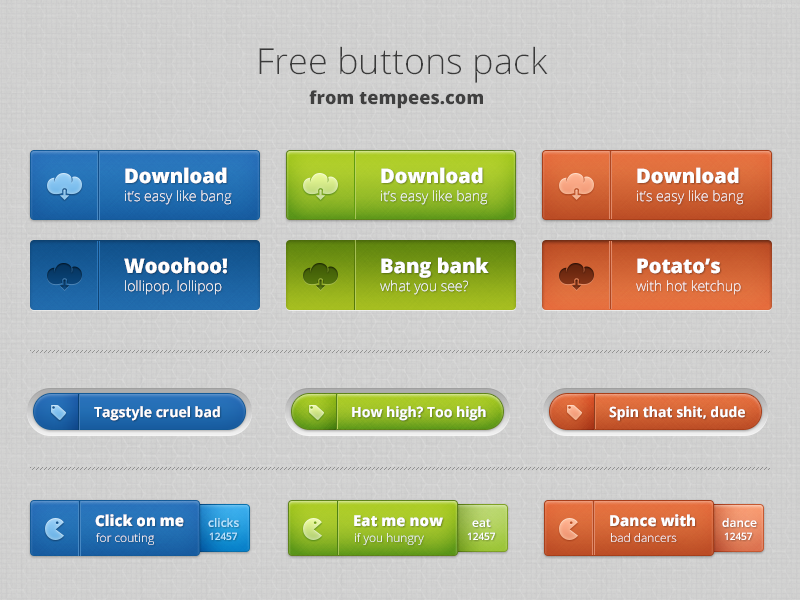
<style>
.page{position:relative;width:800px;height:600px}
.page>*{position:absolute;margin:0}
.t1{font:36px "OpenSans-Light";color:#3a3a3a}
.t2{font:18px "OpenSans-Extrabold";color:#404040}
.t3{font:20px "OpenSans-Extrabold";color:#ffffff}
.t4{font:14px "OpenSans-Light";color:#ffffff}
.t5{font:14px "OpenSans-Bold";color:#ffffff}
.t6{font:15px "OpenSans-Extrabold";color:#ffffff}
.t7{font:12px "OpenSans-Semibold";color:#b7e5ff}
.t8{font:12px "OpenSans-Semibold";color:#ffffff}
.t9{font:12px "OpenSans-Light"}
.t10{font:10px "OpenSans-Semibold";color:#b7e5ff}
.t11{font:12px "OpenSans-Light";color:#ffffff}
.t12{font:10px "OpenSans-Semibold";color:#ffffff}
</style>
<div class="page">
<p class="t1" style="left:259px;top:46px;width:289px;height:37px">Free buttons pack</p>
<p class="t2" style="left:309px;top:90px;width:174px;height:19px">from tempees.com</p>
<p class="t3" style="left:125px;top:167px;width:102px;height:17px">Download</p>
<p class="t3" style="left:381px;top:167px;width:102px;height:17px">Download</p>
<p class="t3" style="left:637px;top:167px;width:102px;height:17px">Download</p>
<p class="t4" style="left:125px;top:190px;width:107px;height:15px">it’s easy like bang</p>
<p class="t4" style="left:381px;top:190px;width:107px;height:15px">it’s easy like bang</p>
<p class="t4" style="left:637px;top:190px;width:107px;height:15px">it’s easy like bang</p>
<p class="t3" style="left:124px;top:257px;width:103px;height:17px">Wooohoo!</p>
<p class="t3" style="left:381px;top:257px;width:108px;height:21px">Bang bank</p>
<p class="t3" style="left:637px;top:258px;width:83px;height:16px">Potato’s</p>
<p class="t4" style="left:125px;top:280px;width:97px;height:15px">lollipop, lollipop</p>
<p class="t4" style="left:380px;top:280px;width:88px;height:15px">what you see?</p>
<p class="t4" style="left:636px;top:280px;width:105px;height:15px">with hot ketchup</p>
<p class="t5" style="left:94px;top:406px;width:126px;height:15px">Tagstyle cruel bad</p>
<p class="t5" style="left:352px;top:406px;width:134px;height:15px">How high? Too high</p>
<p class="t5" style="left:609px;top:406px;width:136px;height:15px">Spin that shit, dude</p>
<p class="t6" style="left:95px;top:514px;width:89px;height:13px">Click on me</p>
<p class="t7" style="left:208px;top:518px;width:31px;height:9px">clicks</p>
<p class="t6" style="left:354px;top:515px;width:89px;height:12px">Eat me now</p>
<p class="t8" style="left:472px;top:519px;width:19px;height:8px">eat</p>
<p class="t6" style="left:610px;top:514px;width:85px;height:13px">Dance with</p>
<p class="t8" style="left:722px;top:518px;width:35px;height:9px">dance</p>
<p class="t9" style="left:96px;top:533px;width:58px;height:12px">for couting</p>
<p class="t10" style="left:209px;top:532px;width:28px;height:8px">12457</p>
<p class="t11" style="left:355px;top:533px;width:69px;height:12px">if you hungry</p>
<p class="t12" style="left:467px;top:532px;width:28px;height:8px">12457</p>
<p class="t11" style="left:611px;top:533px;width:66px;height:9px">bad dancers</p>
<p class="t12" style="left:724px;top:532px;width:28px;height:8px">12457</p>
</div>
